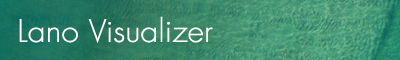
<style>
.page{position:relative;width:400px;height:60px}
.page>*{position:absolute;margin:0}
.t1{font:30.4px "Futura-Light";color:#ffffff;scale:1.05 1}
</style>
<div class="page">
<p class="t1" style="left:19px;top:16px;width:194px;height:27px">Lano Visualizer</p>
</div>
